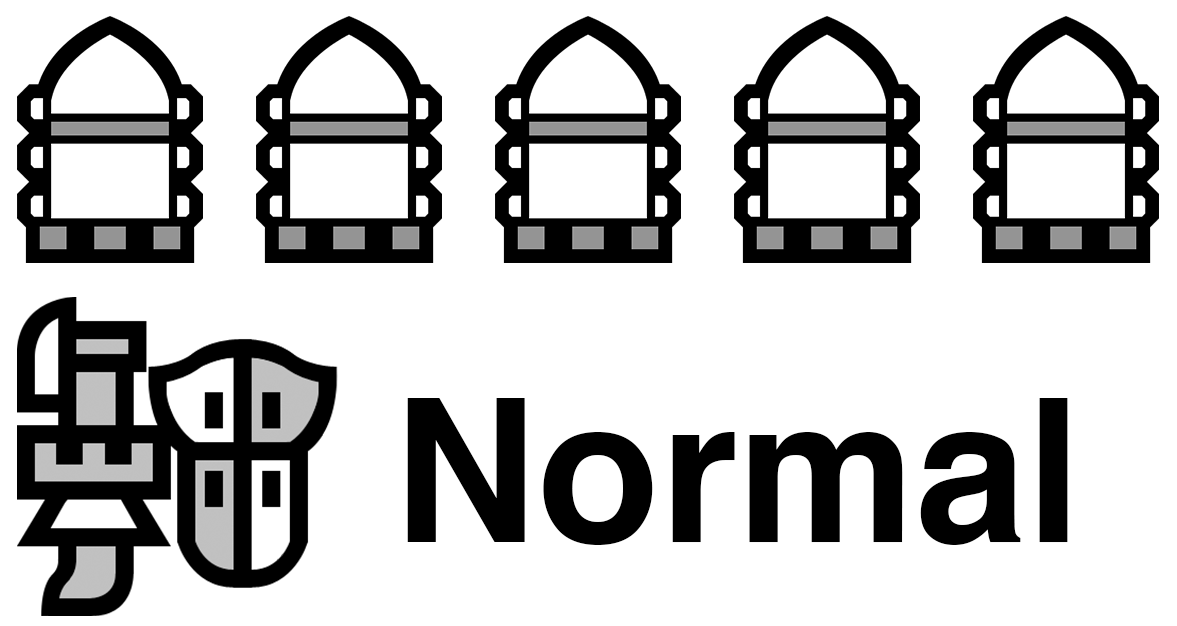
<style>
.page{position:relative;width:1177px;height:626px;background:#ffffff}
.page>*{position:absolute;margin:0}
.t1{font:200px "Helvetica-Bold";color:#000000}
</style>
<div class="page">
<p class="t1" style="left:407px;top:398px;width:661px;height:147px">Normal</p>
</div>
